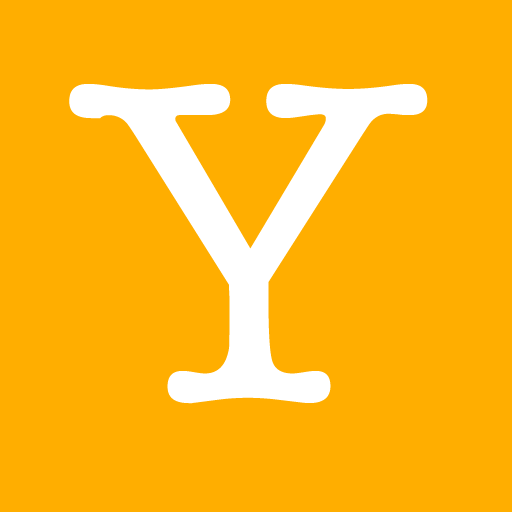
<style>
.page{position:relative;width:512px;height:512px;background:#ffae00}
.page>*{position:absolute;margin:0}
.t1{font:472.6px "AmericanTypewriter";color:#ffffff}
</style>
<div class="page">
<p class="t1" style="left:69px;top:84px;width:359px;height:320px">Y</p>
</div>
